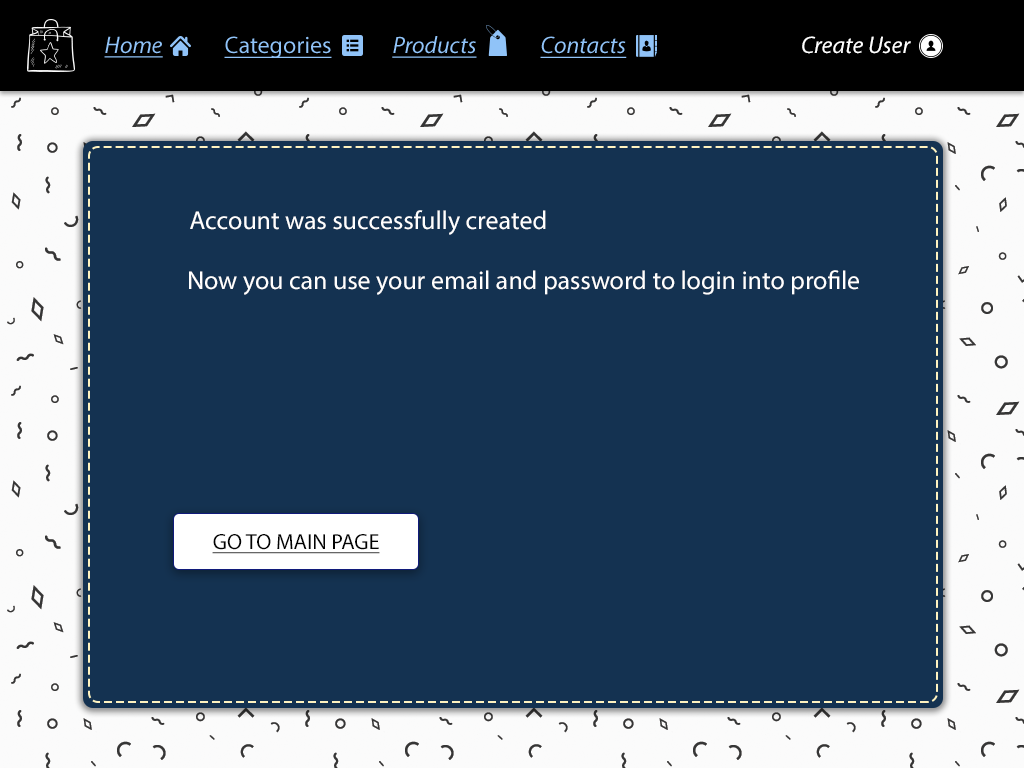
<style>
.page{position:relative;width:1024px;height:768px;background:#143251}
.page>*{position:absolute;margin:0}
.t1{font:24px "MyriadPro-It";color:#90c3f8;text-decoration:underline}
.t2{font:24px "MyriadPro-Regular";color:#90c3f8;text-decoration:underline}
.t3{font:24px "MyriadPro-It";color:#ffffff}
.t4{font:26px "MyriadPro-Regular";color:#ffffff}
.t5{font:22px "MyriadPro-Regular";color:#020202;text-transform:uppercase;text-decoration:underline}
</style>
<div class="page">
<p class="t1" style="left:104px;top:36px;width:59px;height:22px">Home</p>
<p class="t2" style="left:224px;top:36px;width:108px;height:22px">Categories</p>
<p class="t1" style="left:392px;top:36px;width:85px;height:22px">Products</p>
<p class="t1" style="left:540px;top:36px;width:87px;height:22px">Contacts</p>
<p class="t3" style="left:802px;top:36px;width:109px;height:18px">Create User</p>
<p class="t4" style="left:190px;top:210px;width:356px;height:25px">Account was successfully created</p>
<p class="t4" style="left:189px;top:270px;width:670px;height:25px">Now you can use your email and password to login into profile</p>
<p class="t5" style="left:212px;top:534px;width:168px;height:20px">Go to main page</p>
</div>
